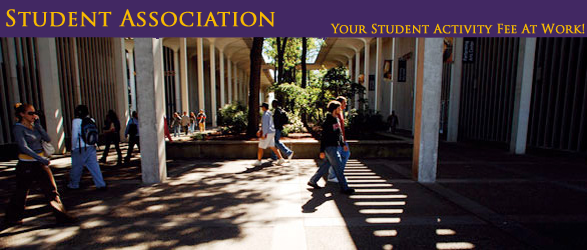
<style>
.page{position:relative;width:587px;height:250px}
.page>*{position:absolute;margin:0}
.t1{font:22px "TrajanPro-Regular";color:#f7ba00;font-weight:bold}
.t2{font:12px "TrajanPro-Regular";color:#f7ba00;font-weight:bold}
</style>
<div class="page">
<p class="t1" style="left:6px;top:9px;width:269px;height:18px">Student Association</p>
<p class="t2" style="left:330px;top:23px;width:255px;height:11px">Your Student Activity Fee At Work!</p>
</div>
